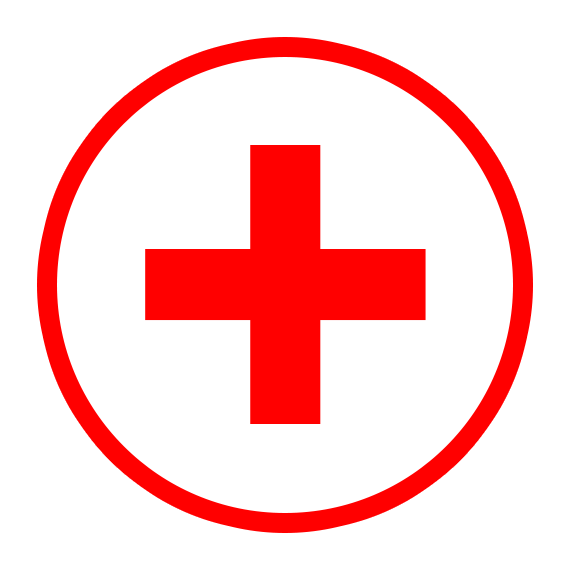
<style>
.page{position:relative;width:570px;height:570px;background:#ffffff}
.page>*{position:absolute;margin:0}
.t1{font:560px "Arial-BoldMT";color:#ff0000}
</style>
<div class="page">
<p class="t1" style="left:145px;top:145px;width:281px;height:279px">+</p>
</div>
